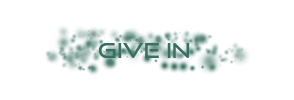
<style>
.page{position:relative;width:294px;height:100px;background:#ffffff}
.page>*{position:absolute;margin:0}
.t1{font:21.3px "GoodTimesRg-Regular";color:#376f61}
</style>
<div class="page">
<p class="t1" style="left:98px;top:43px;width:92px;height:15px">GIVE IN</p>
</div>
